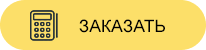
<style>
.page{position:relative;width:206px;height:50px;background:#fcdf69}
.page>*{position:absolute;margin:0}
.t1{font:17px "ArialMT";letter-spacing:0.02em;color:#000000;text-transform:uppercase}
</style>
<div class="page">
<p class="t1" style="left:79px;top:19px;width:86px;height:14px">заказать</p>
</div>
